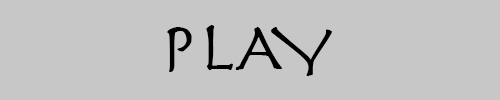
<style>
.page{position:relative;width:500px;height:100px;background:#c7c7c7}
.page>*{position:absolute;margin:0}
.t1{font:72px "Herculanum";color:#000000}
</style>
<div class="page">
<p class="t1" style="left:167px;top:25px;width:165px;height:51px">PLAY</p>
</div>
